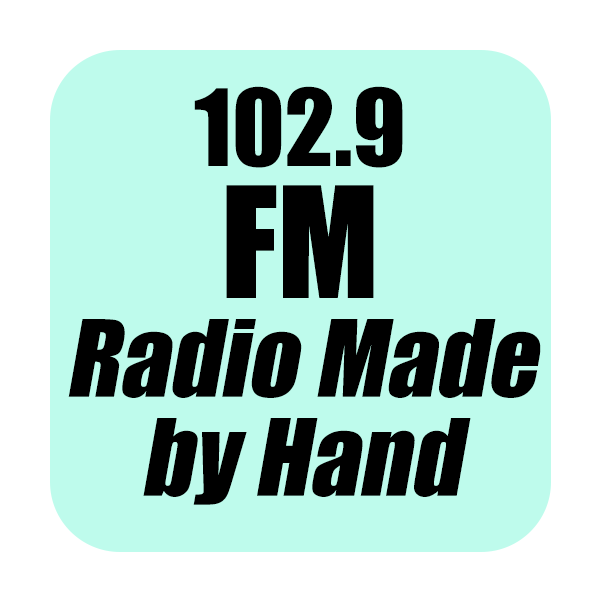
<style>
.page{position:relative;width:600px;height:600px;background:#befbec}
.page>*{position:absolute;margin:0}
.t1{font:98.6px/98.9px "Impact";color:#000000;font-style:italic}
.t2{font:98.6px/131.8px "Impact";color:#000000}
.t3{font:142.4px/131.8px "Impact";color:#000000}
</style>
<div class="page">
<p class="t1" style="left:68px;top:86px;width:473px;height:419px;text-align:center"><span class="t2">102.9<br></span><span class="t3">FM<br></span>Radio Made<br>by Hand</p>
</div>
